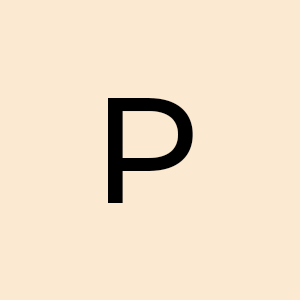
<style>
.page{position:relative;width:300px;height:300px;background:#fbe9d1}
.page>*{position:absolute;margin:0}
.t1{font:150px "Montserrat-Medium";color:#000000}
</style>
<div class="page">
<p class="t1" style="left:108px;top:98px;width:85px;height:105px">P</p>
</div>
